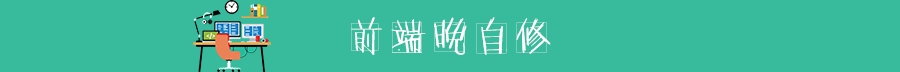
<style>
.page{position:relative;width:900px;height:72px;background:#38bb9c}
.page>*{position:absolute;margin:0}
.t1{font:41.7px "FZNHT";color:#ffffff}
</style>
<div class="page">
<p class="t1" style="left:351px;top:17px;width:200px;height:38px">前端晚自修</p>
</div>
